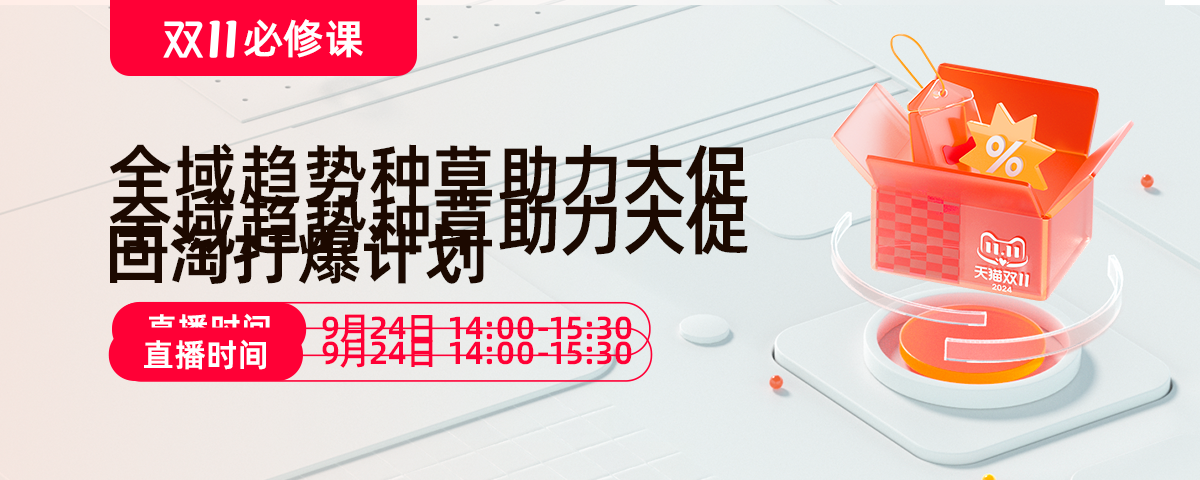
<style>
.page{position:relative;width:1200px;height:480px}
.page>*{position:absolute;margin:0}
.t1{font:66px "AlibabaPuHuiTi_2_85_Bold";letter-spacing:0.01em;color:#1c0900}
.t2{font:32px "AlibabaPuHuiTi_2_85_Bold";letter-spacing:0.02em}
.t3{font:32px "AlibabaPuHuiTi_2_85_Bold";letter-spacing:0.02em;color:#ff0036}
.t4{font:32px "AlibabaPuHuiTi_2_85_Bold";letter-spacing:0.02em;color:#ffffff}
</style>
<div class="page">
<p class="t1" style="left:109px;top:143px;width:639px;height:64px">全域趋势种草助力大促</p>
<p class="t1" style="left:109px;top:193px;width:639px;height:64px">全域趋势种草助力大促</p>
<p class="t1" style="left:110px;top:223px;width:374px;height:61px">回淘打爆计划</p>
<p class="t2" style="left:147px;top:313px;width:123px;height:31px">直播时间</p>
<p class="t3" style="left:322px;top:314px;width:310px;height:29px">9月24日 14:00-15:30</p>
<p class="t4" style="left:144px;top:339px;width:122px;height:31px">直播时间</p>
<p class="t3" style="left:322px;top:339px;width:310px;height:29px">9月24日 14:00-15:30</p>
</div>
